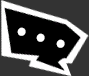
<style>
.page{position:relative;width:89px;height:76px;background:#333333}
.page>*{position:absolute;margin:0}
.t1{font:34.9px "BerlinSansFBDemi-Bold";letter-spacing:0.025em;color:#ffffff}
</style>
<div class="page">
<p class="t1" style="left:17px;top:27px;width:48px;height:21px;rotate:17deg">. . .</p>
</div>
